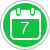
<style>
.page{position:relative;width:50px;height:50px;background:#15c142}
.page>*{position:absolute;margin:0}
.t1{font:16.7px "HelveticaNeue-Light";letter-spacing:-0.01em;color:#ffffff}
.t2{font:19.7px "HelveticaNeue-Light";letter-spacing:-0.01em;color:#003d7f}
</style>
<div class="page">
<p class="t1" style="left:21px;top:22px;width:8px;height:12px">7<span class="t2">7</span></p>
</div>
